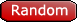
<style>
.page{position:relative;width:77px;height:22px}
.page>*{position:absolute;margin:0}
.t1{font:14px "Verdana";color:#ffffff}
</style>
<div class="page">
<p class="t1" style="left:12px;top:4px;width:56px;height:12px">Random</p>
</div>
